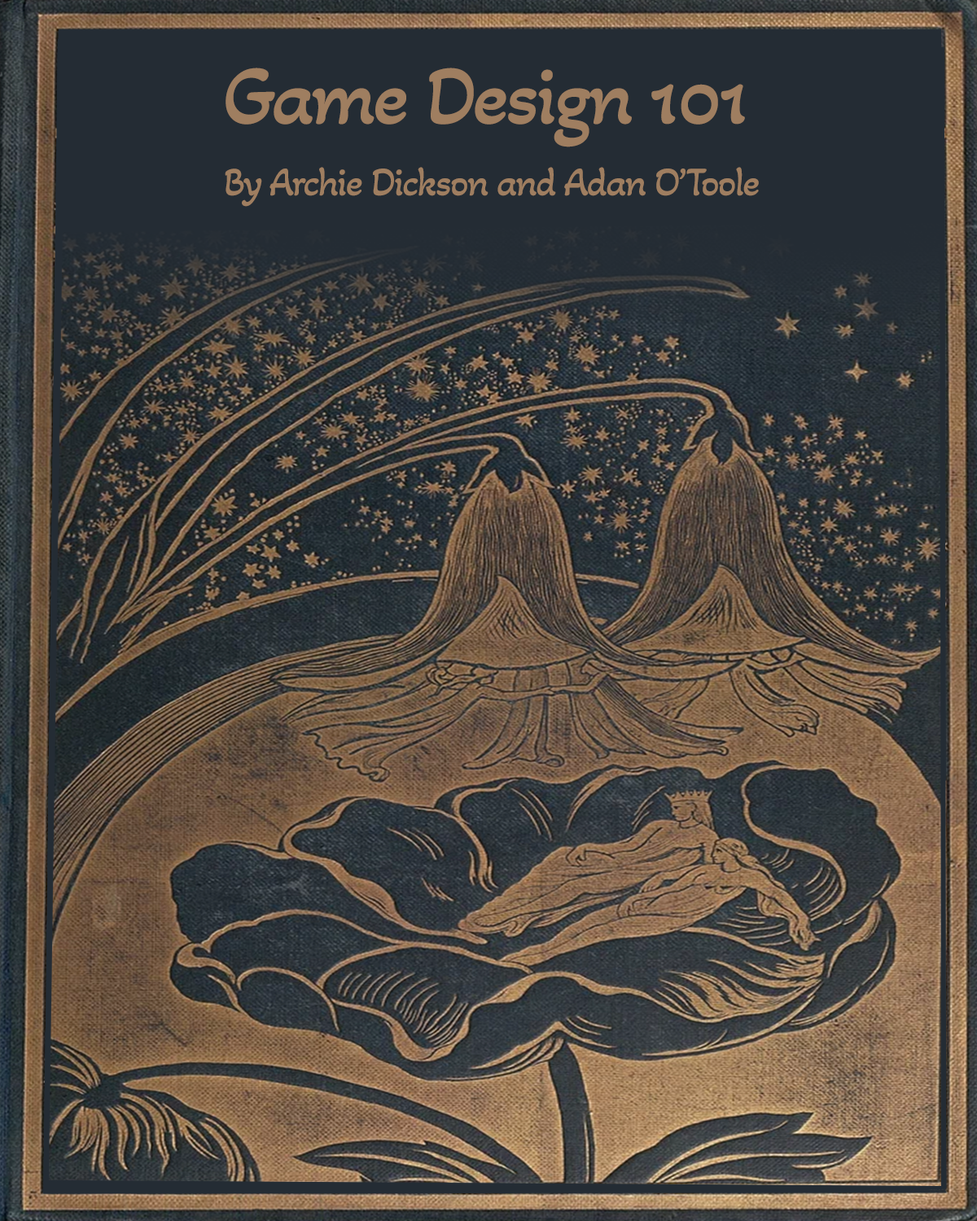
<style>
.page{position:relative;width:977px;height:1221px}
.page>*{position:absolute;margin:0}
.t1{font:84.9px "AkayaKanadaka-Regular";letter-spacing:-0.04em;color:#9f7e60}
.t2{font:40.7px "AkayaKanadaka-Regular";letter-spacing:-0.04em;color:#9f7e60}
</style>
<div class="page">
<p class="t1" style="left:225px;top:68px;width:520px;height:79px">Game Design 101</p>
<p class="t2" style="left:225px;top:167px;width:534px;height:40px">By Archie Dickson and Adan O’Toole</p>
</div>
